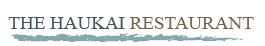
<style>
.page{position:relative;width:265px;height:46px;background:#ffffff}
.page>*{position:absolute;margin:0}
.t1{font:19px "TimesNewRomanPSMT";color:#3f575a}
.t2{font:19px "TimesNewRomanPSMT";color:#786247}
</style>
<div class="page">
<p class="t1" style="left:8px;top:17px;width:246px;height:12px">THE HAUKAI <span class="t2">RESTAURANT</span></p>
</div>
